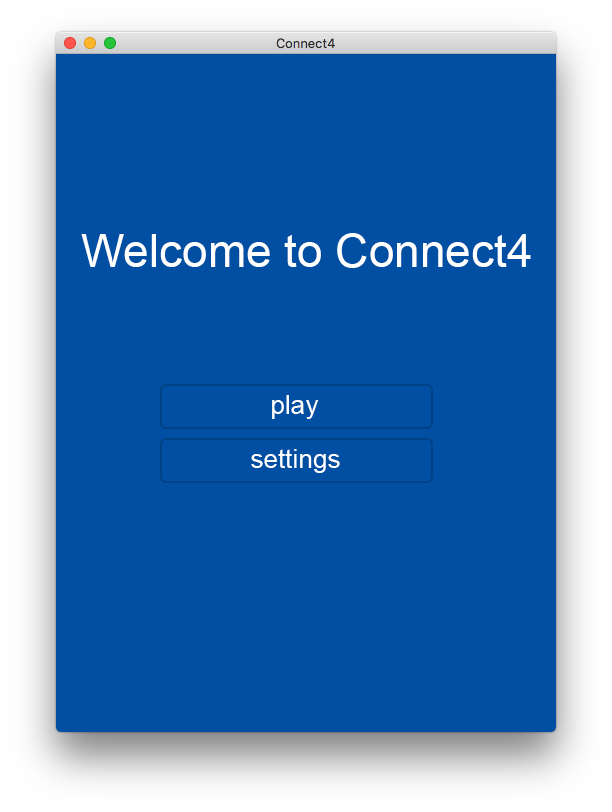
<style>
.page{position:relative;width:612px;height:812px;background:#004fa3}
.page>*{position:absolute;margin:0}
.t1{font:46px "ArialMT";color:#ffffff}
.t2{font:26.1px "ArialMT";color:#ffffff}
</style>
<div class="page">
<p class="t1" style="left:81px;top:233px;width:450px;height:35px">Welcome to Connect4</p>
<p class="t2" style="left:272px;top:395px;width:47px;height:24px">play</p>
<p class="t2" style="left:251px;top:449px;width:89px;height:24px">settings</p>
</div>
